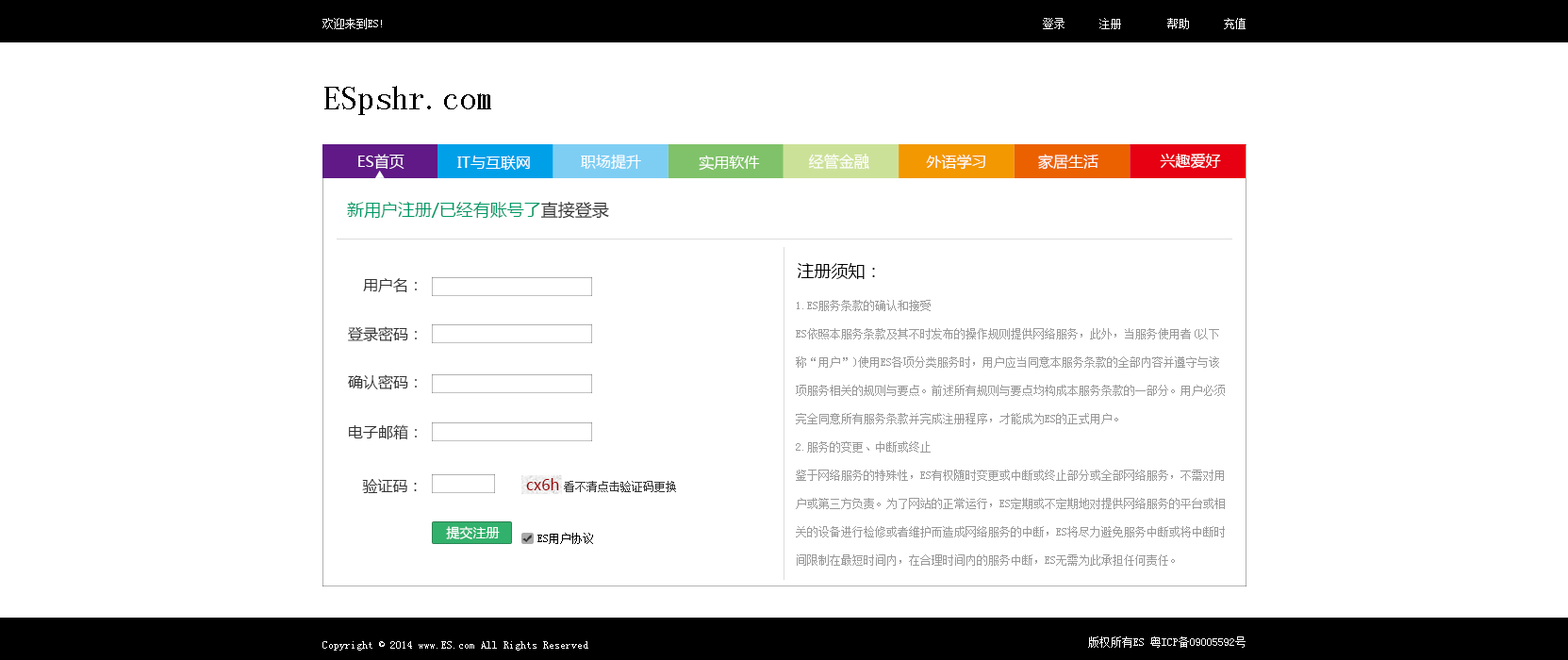
<style>
.page{position:relative;width:1568px;height:660px;background:#ffffff}
.page>*{position:absolute;margin:0}
.t1{font:11.3px "SimSun";color:#ffffff}
.t2{font:33.9px "SimSun";color:#000000}
.t3{font:15.1px "MicrosoftYaHei";color:#ffffff}
.t4{font:17px "MicrosoftYaHei";color:#009966}
.t5{font:17px "MicrosoftYaHei";color:#333333}
.t6{font:17px "MicrosoftYaHei";color:#000000}
.t7{font:15.1px "MicrosoftYaHei";color:#333333}
.t8{font:11.3px/28.3px "SimSun";color:#999999}
.t9{font:13.2px/28.3px "MicrosoftYaHei";color:#000000}
.t10{font:15.1px "MicrosoftYaHei";color:#990000}
.t11{font:11.3px "SimSun";color:#333333}
.t12{font:13.2px "MicrosoftYaHei";color:#ffffff}
.t13{font:11.3px "SimSun";color:#000000}
</style>
<div class="page">
<p class="t1" style="left:322px;top:18px;width:60px;height:11px">欢迎来到ES!</p>
<p class="t1" style="left:1043px;top:18px;width:203px;height:11px">登录      注册        帮助      充值</p>
<p class="t2" style="left:324px;top:86px;width:167px;height:29px">ESpshr.com</p>
<p class="t3" style="left:358px;top:154px;width:46px;height:16px">ES首页</p>
<p class="t3" style="left:457px;top:156px;width:73px;height:14px">IT与互联网</p>
<p class="t3" style="left:581px;top:155px;width:60px;height:15px">职场提升</p>
<p class="t3" style="left:699px;top:155px;width:61px;height:16px">实用软件</p>
<p class="t3" style="left:809px;top:154px;width:60px;height:15px">经管金融</p>
<p class="t3" style="left:926px;top:154px;width:59px;height:16px">外语学习</p>
<p class="t3" style="left:1038px;top:154px;width:60px;height:16px">家居生活</p>
<p class="t3" style="left:1160px;top:153px;width:61px;height:16px">兴趣爱好</p>
<p class="t4" style="left:347px;top:201px;width:262px;height:18px">新用户注册/已经有账号了<span class="t5">直接登录</span></p>
<p class="t6" style="left:797px;top:263px;width:78px;height:16px">注册须知：</p>
<p class="t7" style="left:363px;top:278px;width:54px;height:14px">用户名：</p>
<p class="t8" style="left:796px;top:300px;width:429px;height:266px"><span class="t9"><br></span>1.ES服务条款的确认和接受<br>ES依照本服务条款及其不时发布的操作规则提供网络服务，此外，当服务使用者(以下<br>称“用户”)使用ES各项分类服务时，用户应当同意本服务条款的全部内容并遵守与该<br>项服务相关的规则与要点。前述所有规则与要点均构成本服务条款的一部分。用户必须<br>完全同意所有服务条款并完成注册程序，才能成为ES的正式用户。<br>2.服务的变更、中断或终止<br>鉴于网络服务的特殊性，ES有权随时变更或中断或终止部分或全部网络服务，不需对用<br>户或第三方负责。为了网站的正常运行，ES定期或不定期地对提供网络服务的平台或相<br>关的设备进行检修或者维护而造成网络服务的中断，ES将尽力避免服务中断或将中断时<br>间限制在最短时间内，在合理时间内的服务中断，ES无需为此承担任何责任。</p>
<p class="t7" style="left:348px;top:326px;width:69px;height:16px">登录密码：</p>
<p class="t7" style="left:348px;top:374px;width:69px;height:16px">确认密码：</p>
<p class="t7" style="left:349px;top:424px;width:68px;height:16px">电子邮箱：</p>
<p class="t7" style="left:362px;top:479px;width:55px;height:14px">验证码：</p>
<p class="t10" style="left:526px;top:478px;width:33px;height:12px">cx6h</p>
<p class="t11" style="left:564px;top:481px;width:112px;height:11px">看不清点击验证码更换</p>
<p class="t12" style="left:446px;top:526px;width:54px;height:13px">提交注册</p>
<p class="t13" style="left:537px;top:533px;width:56px;height:11px">ES用户协议</p>
<p class="t1" style="left:322px;top:641px;width:266px;height:10px">Copyright © 2014 www.ES.com All Rights Reserved</p>
<p class="t1" style="left:1088px;top:636px;width:158px;height:12px">版权所有ES 粤ICP备09005592号</p>
</div>
